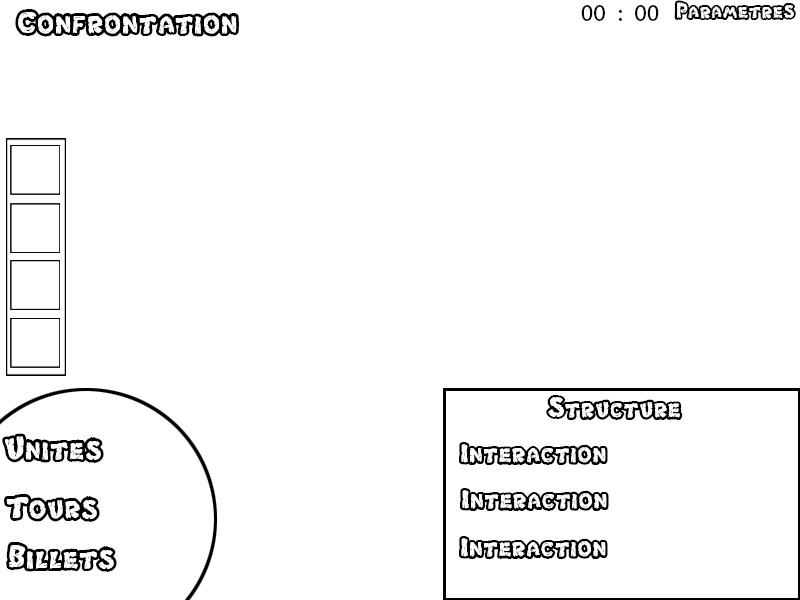
<style>
.page{position:relative;width:800px;height:600px;background:#ffffff}
.page>*{position:absolute;margin:0}
.t1{font:24px "MyriadPro-Regular";color:#000000}
.t2{font:24px "Chlorinar";color:#000000}
.t3{font:36px "Chlorinar";color:#000000}
.t4{font:30px "Chlorinar";color:#000000}
</style>
<div class="page">
<p class="t1" style="left:581px;top:5px;width:78px;height:16px">00 : 00</p>
<p class="t2" style="left:674px;top:0px;width:122px;height:20px">Parametres</p>
<p class="t3" style="left:15px;top:9px;width:224px;height:28px">Confrontation</p>
<p class="t4" style="left:546px;top:395px;width:137px;height:25px">Structure</p>
<p class="t3" style="left:2px;top:433px;width:102px;height:30px">Unites</p>
<p class="t4" style="left:459px;top:442px;width:149px;height:23px">Interaction</p>
<p class="t3" style="left:4px;top:494px;width:96px;height:28px">Tours</p>
<p class="t4" style="left:460px;top:488px;width:149px;height:23px">Interaction</p>
<p class="t3" style="left:6px;top:542px;width:111px;height:30px">Billets</p>
<p class="t4" style="left:459px;top:536px;width:149px;height:23px">Interaction</p>
</div>
